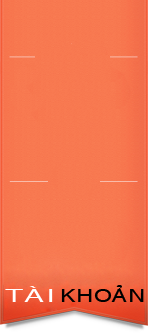
<style>
.page{position:relative;width:148px;height:333px}
.page>*{position:absolute;margin:0}
.t1{font:18px "VNI-Helve";color:#ffffff;scale:1.66 1}
.t2{font:18px "VNI-Helve";color:#000000;scale:1.27 1}
</style>
<div class="page">
<p class="t1" style="left:5px;top:286px;width:48px;height:16px">TAØI</p>
<p class="t2" style="left:61px;top:285px;width:83px;height:17px">KHOAÛN</p>
</div>
